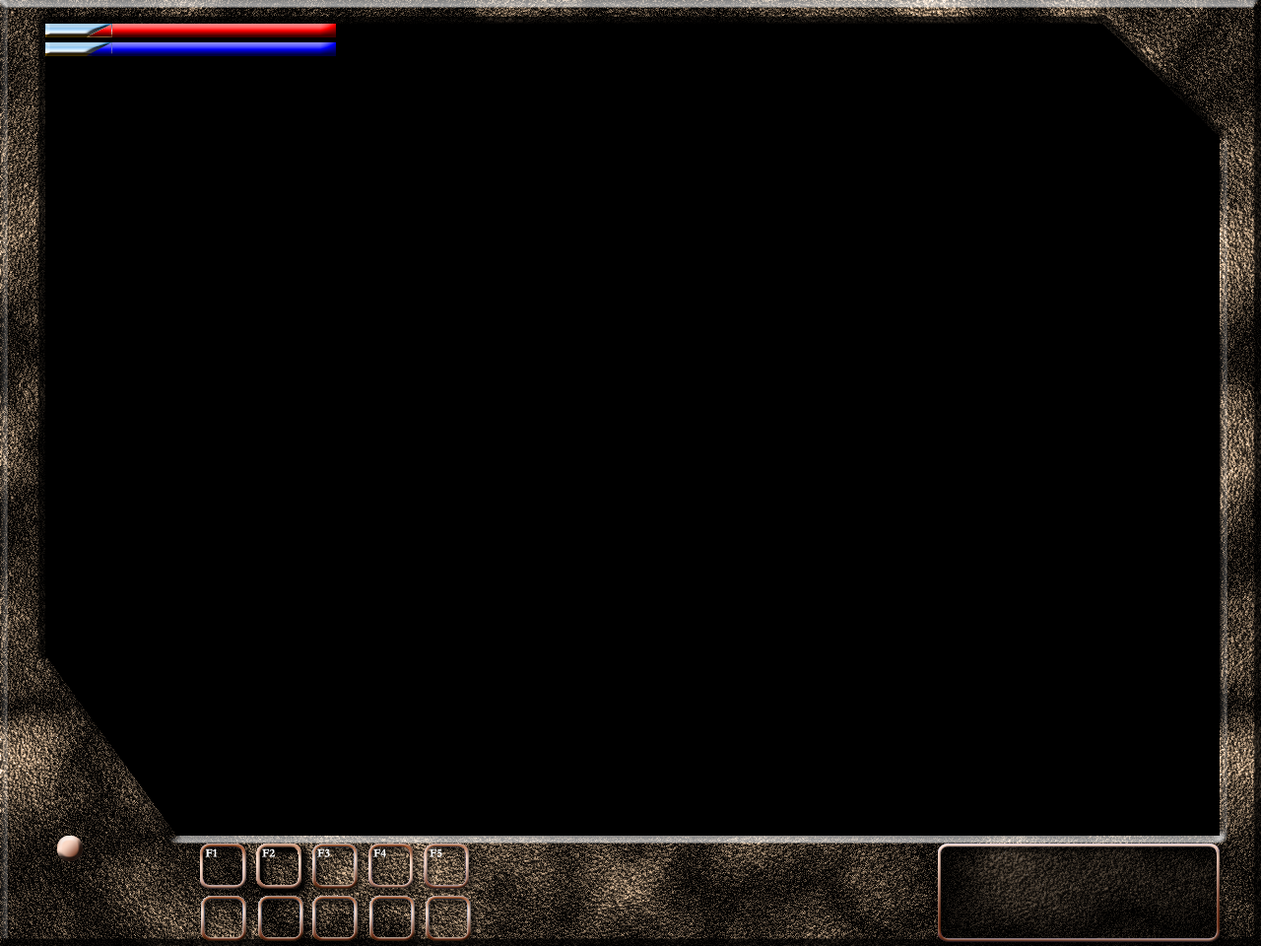
<style>
.page{position:relative;width:1261px;height:946px;background:#000000}
.page>*{position:absolute;margin:0}
.t1{font:11.8px "Garamond-Bold";color:#ffffff}
</style>
<div class="page">
<p class="t1" style="left:205px;top:848px;width:13px;height:9px">F1</p>
<p class="t1" style="left:262px;top:848px;width:13px;height:9px">F2</p>
<p class="t1" style="left:317px;top:848px;width:13px;height:9px">F3</p>
<p class="t1" style="left:373px;top:848px;width:13px;height:9px">F4</p>
<p class="t1" style="left:429px;top:848px;width:13px;height:9px">F5</p>
</div>
